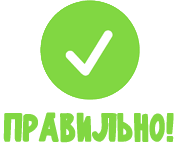
<style>
.page{position:relative;width:180px;height:150px;background:#ffffff}
.page>*{position:absolute;margin:0}
.t1{font:40px "Earth'sMightiestBoldCyrillic";color:#81d742;font-weight:bold}
</style>
<div class="page">
<p class="t1" style="left:3px;top:112px;width:171px;height:31px">ПРАВИЛЬНО!</p>
</div>
